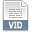
<style>
.page{position:relative;width:32px;height:32px;background:#ffffff}
.page>*{position:absolute;margin:0}
.t1{font:8.4px "Verdana";color:#ffffff;font-weight:bold;scale:0.83 1}
</style>
<div class="page">
<p class="t1" style="left:8px;top:21px;width:14px;height:8px">VID</p>
</div>
